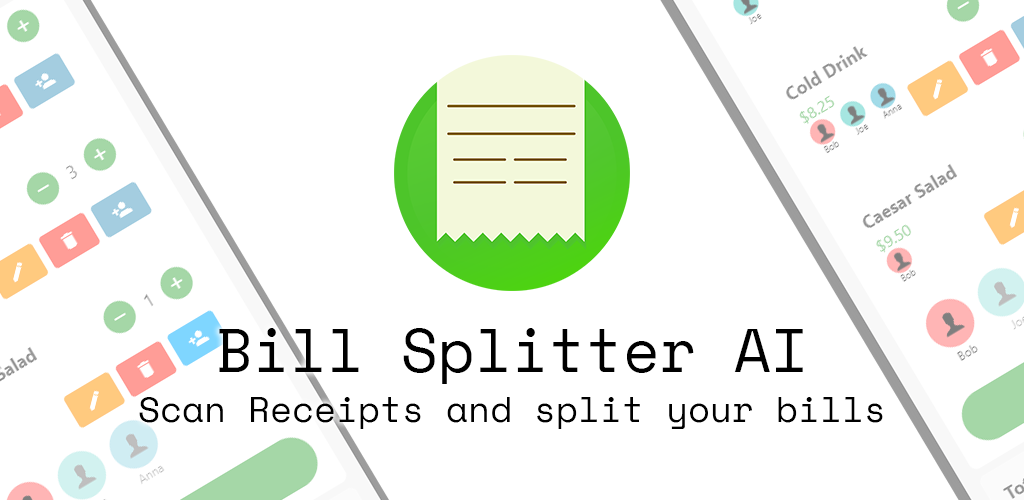
<style>
.page{position:relative;width:1024px;height:500px;background:#ffffff}
.page>*{position:absolute;margin:0}
.t1{font:60px "SpaceMono-Regular";color:#000000}
.t2{font:36px "SpaceMono-Regular";color:#000000}
</style>
<div class="page">
<p class="t1" style="left:219px;top:328px;width:584px;height:56px">Bill Splitter AI</p>
<p class="t2" style="left:139px;top:397px;width:744px;height:32px">Scan Receipts and split your bills</p>
</div>
